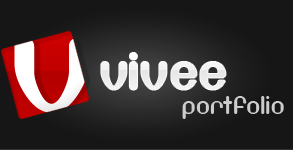
<style>
.page{position:relative;width:293px;height:150px;background:#161616}
.page>*{position:absolute;margin:0}
.t1{font:99.9px "DF667Chlorine";color:#ffffff;font-weight:bold;scale:1.09 1}
.t2{font:36px "DF667Chlorine";color:#f7f7f7;font-weight:bold}
.t3{font:18px "DF667Chlorine";color:#cccccc}
</style>
<div class="page">
<p class="t1" style="left:14px;top:37px;width:75px;height:76px">v</p>
<p class="t2" style="left:101px;top:53px;width:125px;height:37px">vivee</p>
<p class="t3" style="left:182px;top:96px;width:102px;height:23px">portfolio</p>
</div>
